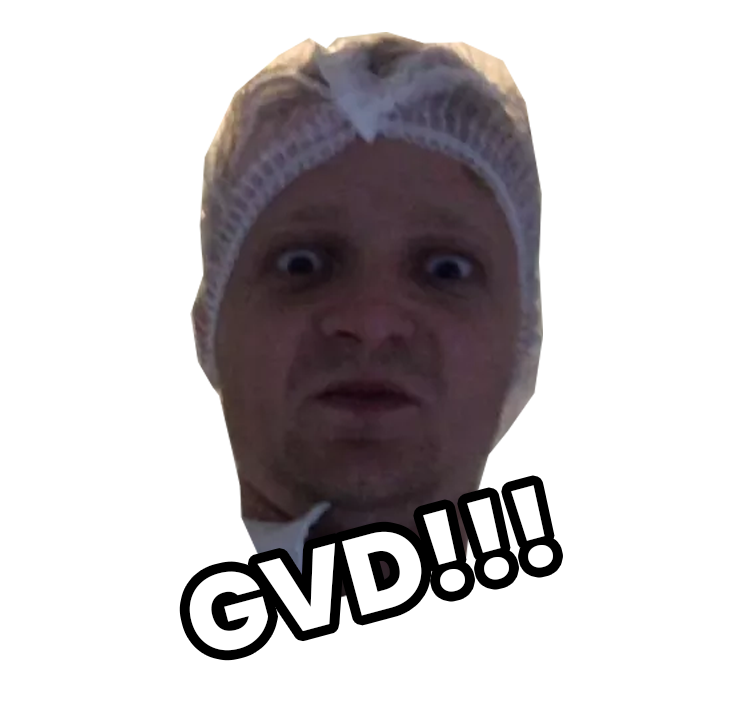
<style>
.page{position:relative;width:755px;height:720px;background:#ffffff}
.page>*{position:absolute;margin:0}
.t1{font:108.6px "Poppins-ExtraBold";color:#ffffff}
</style>
<div class="page">
<p class="t1" style="left:189px;top:485px;width:364px;height:166px;rotate:-15deg">GVD!!!</p>
</div>
